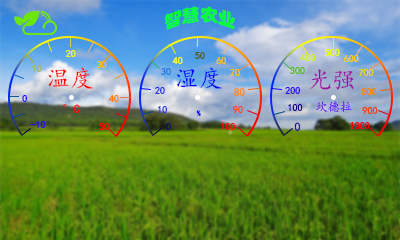
<style>
.page{position:relative;width:400px;height:240px}
.page>*{position:absolute;margin:0}
.t1{font:17.1px "STHupo";color:#07ff3c}
.t2{font:10px "¿¬Ìå";color:#e9fe00}
.t3{font:10px "¿¬Ìå";color:#575804}
.t4{font:10px "¿¬Ìå";color:#d3f206}
.t5{font:10px "¿¬Ìå";color:#f0ff00}
.t6{font:10px "¿¬Ìå";color:#a2b851}
.t7{font:10px "¿¬Ìå";color:#febf00}
.t8{font:10px "¿¬Ìå";color:#fcff00}
.t9{font:10px "¿¬Ìå";color:#ffc000}
.t10{font:10px "¿¬Ìå";color:#ffcc00}
.t11{font:24px "¿¬Ìå";color:#fe0000}
.t12{font:10px "¿¬Ìå";color:#227ae7}
.t13{font:24px "¿¬Ìå";color:#0000ff}
.t14{font:10px "¿¬Ìå";color:#53b603}
.t15{font:24px "¿¬Ìå";color:#a008a2}
.t16{font:10px "¿¬Ìå";color:#e9d714}
.t17{font:10px "¿¬Ìå";color:#222ee7}
.t18{font:11px "¿¬Ìå";color:#ff8400}
.t19{font:10px "¿¬Ìå";color:#2c06f1}
.t20{font:10px "¿¬Ìå";color:#f98202}
.t21{font:10px "¿¬Ìå";color:#2502fd}
.t22{font:10px "¿¬Ìå";color:#fe7e00}
.t23{font:12px "¿¬Ìå"}
.t24{font:12px "¿¬Ìå";color:#fd0202}
.t25{font:8px "¿¬Ìå";color:#000fff}
.t26{font:10px "¿¬Ìå";color:#ff4800}
.t27{font:10px "¿¬Ìå";color:#1a0293}
.t28{font:10px "¿¬Ìå";color:#f93c02}
.t29{font:10px "¿¬Ìå";color:#fe0000}
.t30{font:10px "¿¬Ìå";color:#010768}
.t31{font:10px "¿¬Ìå";color:#ff0000}
.t32{font:12px "¿¬Ìå";color:#1a0293}
</style>
<div class="page">
<p class="t1" style="left:164px;top:6px;width:71px;height:24px">智慧农业</p>
<p class="t2" style="left:65px;top:50px;width:11px;height:7px">20</p>
<p class="t3" style="left:195px;top:52px;width:10px;height:7px">50</p>
<p class="t4" style="left:300px;top:54px;width:15px;height:7px">400</p>
<p class="t5" style="left:324px;top:49px;width:16px;height:7px">500</p>
<p class="t6" style="left:32px;top:65px;width:10px;height:7px">10</p>
<p class="t7" style="left:96px;top:61px;width:11px;height:7px">30</p>
<p class="t8" style="left:172px;top:57px;width:11px;height:7px">40</p>
<p class="t9" style="left:216px;top:57px;width:10px;height:7px">60</p>
<p class="t10" style="left:344px;top:55px;width:15px;height:7px">600</p>
<p class="t11" style="left:48px;top:67px;width:45px;height:22px">温度</p>
<p class="t12" style="left:161px;top:68px;width:10px;height:7px">30</p>
<p class="t13" style="left:177px;top:67px;width:45px;height:22px">湿度</p>
<p class="t9" style="left:230px;top:69px;width:10px;height:7px">70</p>
<p class="t14" style="left:290px;top:67px;width:15px;height:7px">300</p>
<p class="t15" style="left:310px;top:69px;width:44px;height:21px">光强</p>
<p class="t16" style="left:358px;top:69px;width:16px;height:7px">700</p>
<p class="t17" style="left:155px;top:87px;width:10px;height:7px">20</p>
<p class="t18" style="left:234px;top:88px;width:11px;height:8px">80</p>
<p class="t19" style="left:285px;top:87px;width:15px;height:7px">200</p>
<p class="t20" style="left:361px;top:88px;width:16px;height:7px">800</p>
<p class="t21" style="left:22px;top:95px;width:5px;height:7px">0</p>
<p class="t22" style="left:108px;top:95px;width:11px;height:7px">40</p>
<p class="t23" style="left:316px;top:101px;width:36px;height:11px">坎德拉</p>
<p class="t24" style="left:63px;top:104px;width:17px;height:9px">°C</p>
<p class="t17" style="left:158px;top:106px;width:9px;height:7px">10</p>
<p class="t25" style="left:196px;top:110px;width:5px;height:6px">%</p>
<p class="t26" style="left:233px;top:106px;width:10px;height:7px">90</p>
<p class="t27" style="left:288px;top:104px;width:15px;height:7px">100</p>
<p class="t28" style="left:362px;top:107px;width:16px;height:7px">900</p>
<p class="t21" style="left:30px;top:121px;width:16px;height:7px">-10</p>
<p class="t29" style="left:99px;top:123px;width:10px;height:7px">50</p>
<p class="t30" style="left:166px;top:123px;width:5px;height:7px">0</p>
<p class="t31" style="left:221px;top:123px;width:14px;height:7px">100</p>
<p class="t32" style="left:294px;top:122px;width:7px;height:9px">0</p>
<p class="t31" style="left:350px;top:122px;width:20px;height:7px">1000</p>
</div>
